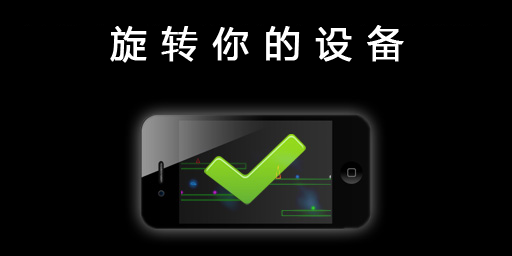
<style>
.page{position:relative;width:512px;height:256px;background:#000000}
.page>*{position:absolute;margin:0}
.t1{font:36px "MicrosoftYaHei";letter-spacing:0.4em;color:#ffffff;font-weight:bold}
</style>
<div class="page">
<p class="t1" style="left:110px;top:25px;width:294px;height:38px">旋转你的设备</p>
</div>
